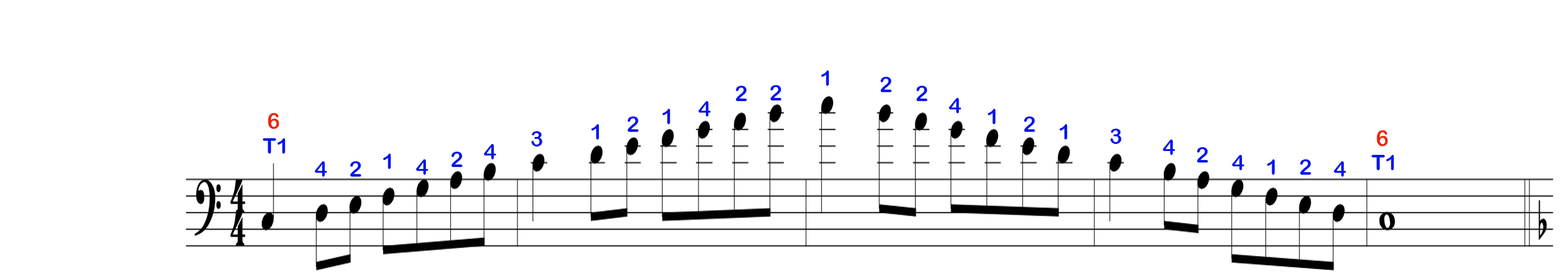
<style>
.page{position:relative;width:1568px;height:279px;background:#ffffff}
.page>*{position:absolute;margin:0}
.t1{font:21.8px "ArialRoundedMTBold";color:#0417ec}
.t2{font:21.8px "ArialRoundedMTBold";color:#ec2404}
</style>
<div class="page">
<p class="t1" style="left:821px;top:70px;width:8px;height:16px">1</p>
<p class="t1" style="left:880px;top:77px;width:12px;height:15px">2</p>
<p class="t1" style="left:735px;top:86px;width:12px;height:15px">2</p>
<p class="t1" style="left:770px;top:85px;width:11px;height:16px">2</p>
<p class="t1" style="left:916px;top:86px;width:11px;height:15px">2</p>
<p class="t1" style="left:698px;top:101px;width:13px;height:16px">4</p>
<p class="t1" style="left:949px;top:98px;width:12px;height:15px">4</p>
<p class="t2" style="left:268px;top:113px;width:11px;height:16px">6</p>
<p class="t1" style="left:662px;top:109px;width:9px;height:15px">1</p>
<p class="t1" style="left:988px;top:109px;width:8px;height:15px">1</p>
<p class="t1" style="left:591px;top:124px;width:9px;height:16px">1</p>
<p class="t1" style="left:627px;top:117px;width:12px;height:15px">2</p>
<p class="t1" style="left:1024px;top:117px;width:11px;height:15px">2</p>
<p class="t1" style="left:1059px;top:124px;width:9px;height:16px">1</p>
<p class="t1" style="left:531px;top:131px;width:12px;height:16px">3</p>
<p class="t1" style="left:1110px;top:129px;width:12px;height:15px">3</p>
<p class="t2" style="left:1376px;top:130px;width:12px;height:17px">6</p>
<p class="t1" style="left:263px;top:138px;width:23px;height:16px">T1</p>
<p class="t1" style="left:484px;top:144px;width:12px;height:15px">4</p>
<p class="t1" style="left:1163px;top:140px;width:12px;height:15px">4</p>
<p class="t1" style="left:1196px;top:147px;width:12px;height:16px">2</p>
<p class="t1" style="left:314px;top:161px;width:13px;height:16px">4</p>
<p class="t1" style="left:350px;top:161px;width:11px;height:16px">2</p>
<p class="t1" style="left:383px;top:154px;width:8px;height:15px">1</p>
<p class="t1" style="left:416px;top:159px;width:13px;height:16px">4</p>
<p class="t1" style="left:451px;top:152px;width:11px;height:15px">2</p>
<p class="t1" style="left:1232px;top:155px;width:13px;height:15px">4</p>
<p class="t1" style="left:1267px;top:159px;width:8px;height:16px">1</p>
<p class="t1" style="left:1300px;top:159px;width:11px;height:16px">2</p>
<p class="t1" style="left:1334px;top:161px;width:12px;height:16px">4</p>
<p class="t1" style="left:1371px;top:155px;width:23px;height:15px">T1</p>
</div>
